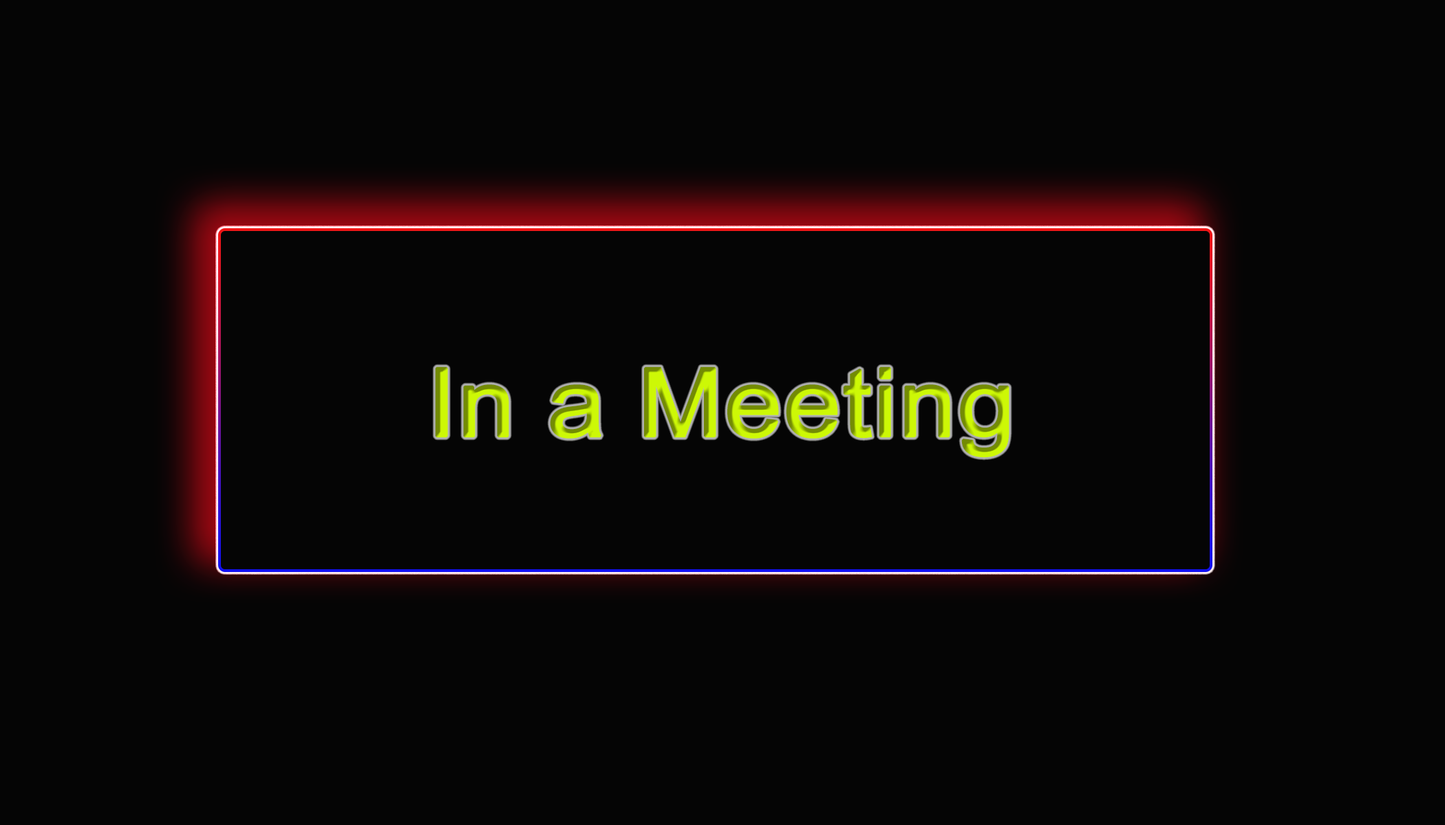
<style>
.page{position:relative;width:1445px;height:825px;background:#050505}
.page>*{position:absolute;margin:0}
.t1{font:94.6px "ArialMT";font-weight:bold;scale:1.07 1}
</style>
<div class="page">
<p class="t1" style="left:435px;top:367px;width:574px;height:91px">In a Meeting</p>
</div>
